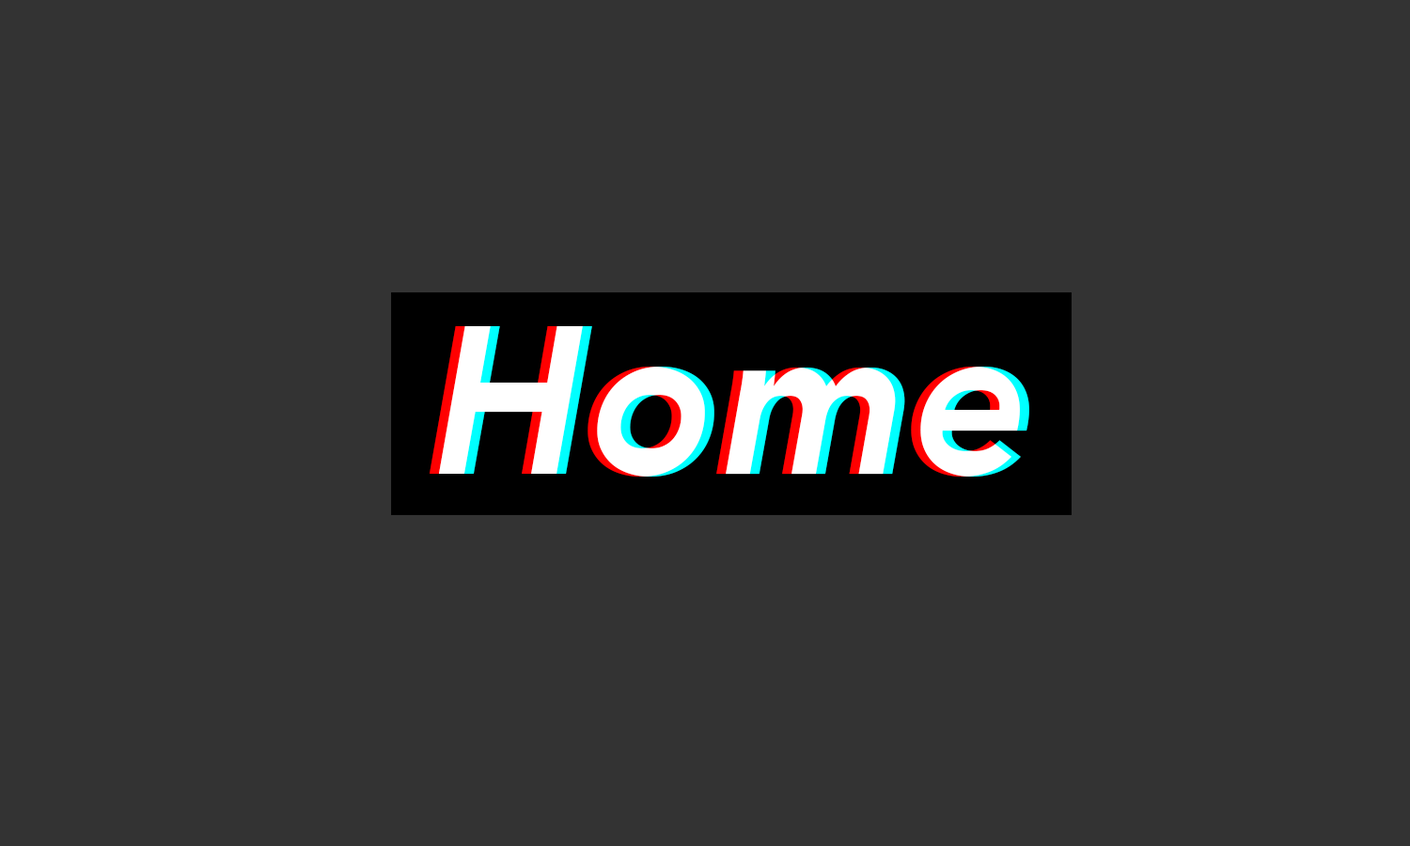
<style>
.page{position:relative;width:1410px;height:846px;background:#333333}
.page>*{position:absolute;margin:0}
.t1{font:208.2px "AvenirNext-BoldItalic";color:#ffffff}
</style>
<div class="page">
<p class="t1" style="left:430px;top:326px;width:590px;height:150px">Home</p>
<p class="t1" style="left:439px;top:326px;width:590px;height:150px">Home</p>
</div>
